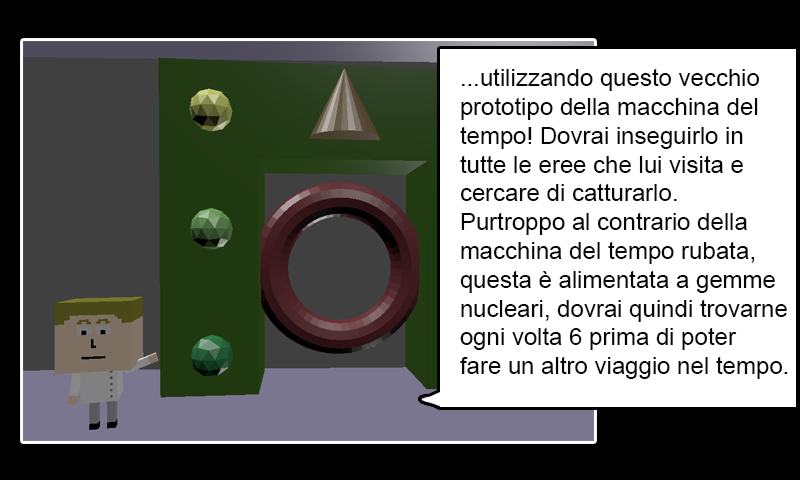
<style>
.page{position:relative;width:800px;height:480px;background:#ffffff}
.page>*{position:absolute;margin:0}
.t1{font:24px "ArialMT";color:#080808}
</style>
<div class="page">
<p class="t1" style="left:460px;top:68px;width:328px;height:311px">...utilizzando questo vecchio<br>prototipo della macchina del<br>tempo! Dovrai inseguirlo in<br>tutte le eree che lui visita e<br>cercare di catturarlo.<br>Purtroppo al contrario della<br>macchina del tempo rubata,<br>questa è alimentata a gemme<br>nucleari, dovrai quindi trovarne<br>ogni volta 6 prima di poter<br>fare un altro viaggio nel tempo.</p>
</div>
